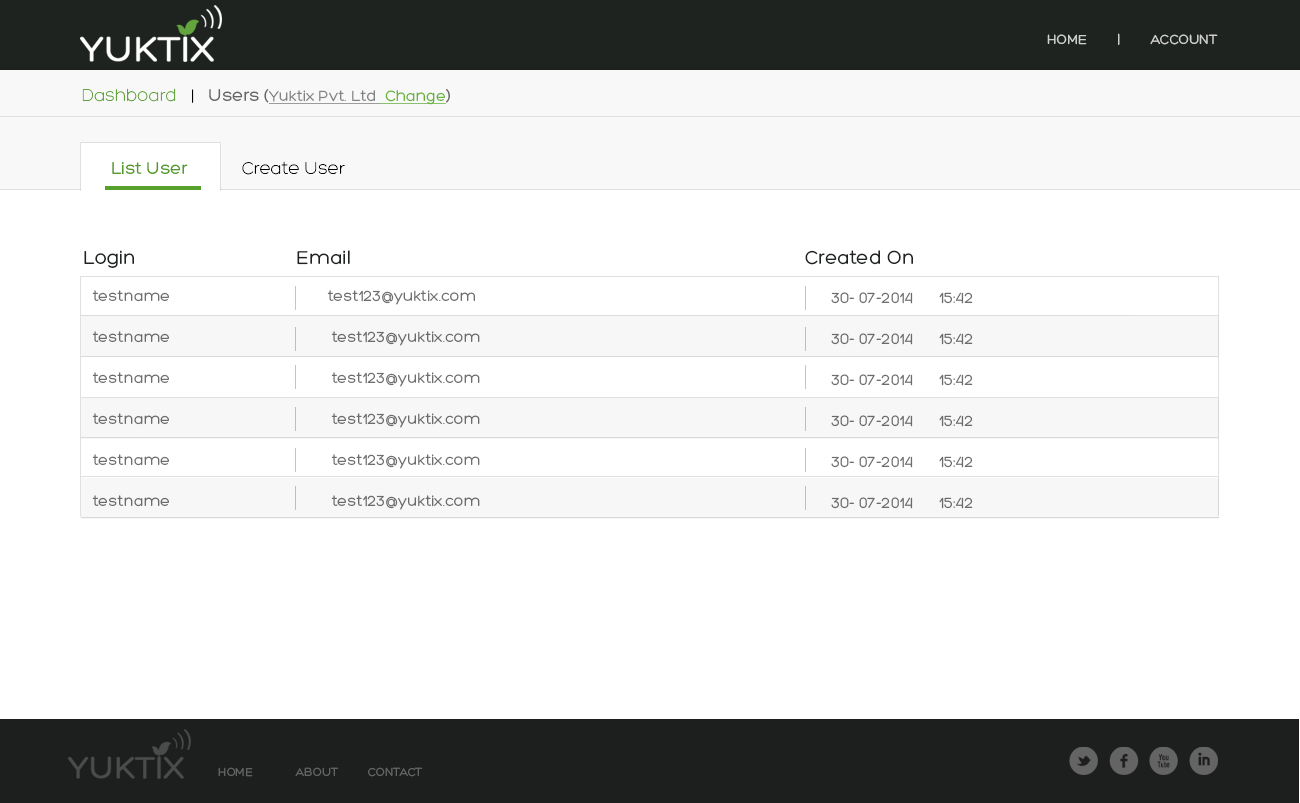
<style>
.page{position:relative;width:1300px;height:803px;background:#ffffff}
.page>*{position:absolute;margin:0}
.t1{font:14px "Hero";color:#cecfce;text-transform:uppercase}
.t2{font:16px "Hero";color:#838383;text-decoration:underline}
.t3{font:18px "Hero-Light";color:#63a43f}
.t4{font:18px "Hero-Light";color:#000000}
.t5{font:18px "Hero";color:#666666}
.t6{font:16px "Hero";color:#68b43a;text-decoration:underline}
.t7{font:18px "Hero";color:#539a27}
.t8{font:20px "Hero";color:#1f2320}
.t9{font:16px/41px "Hero";color:#6b6b6b}
.t10{font:16px/41px "Hero";color:#6c6c6c}
.t11{font:40.5px "Socialico";letter-spacing:0.2em;color:#636463}
.t12{font:12.2px "Hero";color:#636463;text-transform:uppercase}
</style>
<div class="page">
<p class="t1" style="left:1047px;top:33px;width:171px;height:12px">home        |        Account</p>
<p class="t2" style="left:82px;top:88px;width:368px;height:17px"><span class="t3">Dashboard</span><span class="t4">   |   </span><span class="t5">Users (</span>Yuktix Pvt. Ltd <span class="t6"> Change</span><span class="t5">)</span></p>
<p class="t4" style="left:112px;top:161px;width:233px;height:14px"><span class="t7">List User           </span>Create User</p>
<p class="t8" style="left:84px;top:250px;width:50px;height:18px">Login</p>
<p class="t8" style="left:297px;top:250px;width:53px;height:15px">Email</p>
<p class="t8" style="left:805px;top:250px;width:108px;height:15px">Created On</p>
<p class="t9" style="left:92px;top:290px;width:388px;height:220px">testname                                    test123@yuktix.com<br>testname                               test123@yuktix.com<br>testname                               test123@yuktix.com<br>testname                               test123@yuktix.com<br>testname                               test123@yuktix.com<br>testname                               test123@yuktix.com<br>007                                              Temperature</p>
<p class="t10" style="left:831px;top:292px;width:142px;height:217px">30- 07-2014      15:42<br>30- 07-2014      15:42<br>30- 07-2014      15:42<br>30- 07-2014      15:42<br>30- 07-2014      15:42<br>30- 07-2014      15:42<br>30- 07-2014      15:42</p>
<p class="t11" style="left:1069px;top:747px;width:149px;height:28px">lfxi</p>
<p class="t12" style="left:218px;top:767px;width:205px;height:10px">home             About         Contact</p>
</div>
